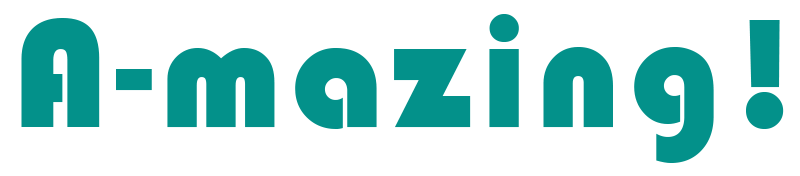
<style>
.page{position:relative;width:800px;height:176px;background:#ffffff}
.page>*{position:absolute;margin:0}
.t1{font:160px "Bauhaus93";letter-spacing:0.05em;color:#03918a}
</style>
<div class="page">
<p class="t1" style="left:21px;top:14px;width:763px;height:149px">A-mazing!</p>
</div>
